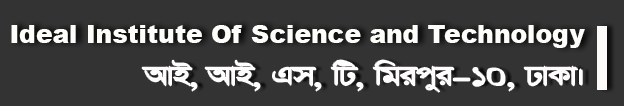
<style>
.page{position:relative;width:624px;height:106px;background:#333333}
.page>*{position:absolute;margin:0}
.t1{font:25px "Arial-Black";color:#fdfdfa}
.t2{font:40px "RabeyaSreeMJ-Regular";color:#fefdfd}
</style>
<div class="page">
<p class="t1" style="left:11px;top:25px;width:574px;height:23px">Ideal Institute Of Science and Technology</p>
<p class="t2" style="left:142px;top:60px;width:440px;height:32px">AvB, AvB, Gm, wU, wgicyi-10, XvKv|</p>
</div>
